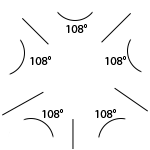
<style>
.page{position:relative;width:150px;height:150px;background:#ffffff}
.page>*{position:absolute;margin:0}
.t1{font:12px "MyriadPro-Regular";color:#000000}
</style>
<div class="page">
<p class="t1" style="left:66px;top:24px;width:21px;height:9px">108°</p>
<p class="t1" style="left:30px;top:56px;width:21px;height:9px">108°</p>
<p class="t1" style="left:105px;top:56px;width:21px;height:9px">108°</p>
<p class="t1" style="left:42px;top:109px;width:21px;height:9px">108°</p>
<p class="t1" style="left:95px;top:109px;width:21px;height:9px">108°</p>
</div>
